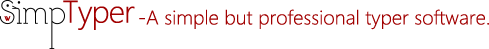
<style>
.page{position:relative;width:489px;height:49px;background:#ffffff}
.page>*{position:absolute;margin:0}
.t1{font:29.1px "MicrosoftYaHeiLight";letter-spacing:-0.025em;color:#a10000}
.t2{font:18.3px "MicrosoftYaHeiLight";color:#a10000}
</style>
<div class="page">
<p class="t1" style="left:63px;top:0px;width:72px;height:30px">Typer</p>
<p class="t2" style="left:139px;top:9px;width:350px;height:21px">-A simple but professional typer software.</p>
</div>
